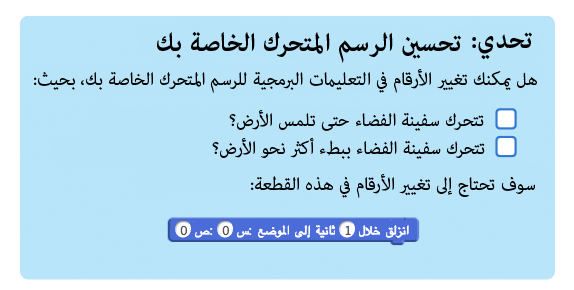
<style>
.page{position:relative;width:574px;height:290px;background:#b8e4f9}
.page>*{position:absolute;margin:0}
.t1{font:36px "AdobeArabic-Bold";color:#000000}
.t2{font:25px "AdobeArabic-Regular";color:#000000}
</style>
<div class="page">
<p class="t1" style="left:157px;top:31px;width:304px;height:32px">تحسين الرسم المتحرك الخاصة بك</p>
<p class="t1" style="left:472px;top:32px;width:60px;height:28px">تحدي:</p>
<p class="t2" style="left:34px;top:69px;width:503px;height:24px">هل يمكنك تغيير الأرقام في التعليمات البرمجية للرسم المتحرك الخاصة بك، بحيث:</p>
<p class="t2" style="left:229px;top:110px;width:255px;height:21px">تتحرك سفينة الفضاء حتى تلمس الأرض؟</p>
<p class="t2" style="left:212px;top:137px;width:273px;height:22px">تتحرك سفينة الفضاء ببطء أكثر نحو الأرض؟</p>
<p class="t2" style="left:251px;top:174px;width:284px;height:24px">سوف تحتاج إلى تغيير الأرقام في هذه القطعة:</p>
</div>
